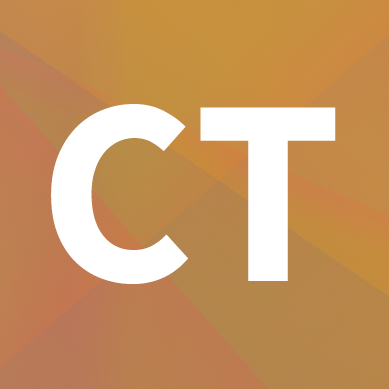
<style>
.page{position:relative;width:389px;height:389px}
.page>*{position:absolute;margin:0}
.t1{font:266px "SourceSansPro-Bold";color:#ffffff}
</style>
<div class="page">
<p class="t1" style="left:51px;top:104px;width:285px;height:180px">CT</p>
</div>
